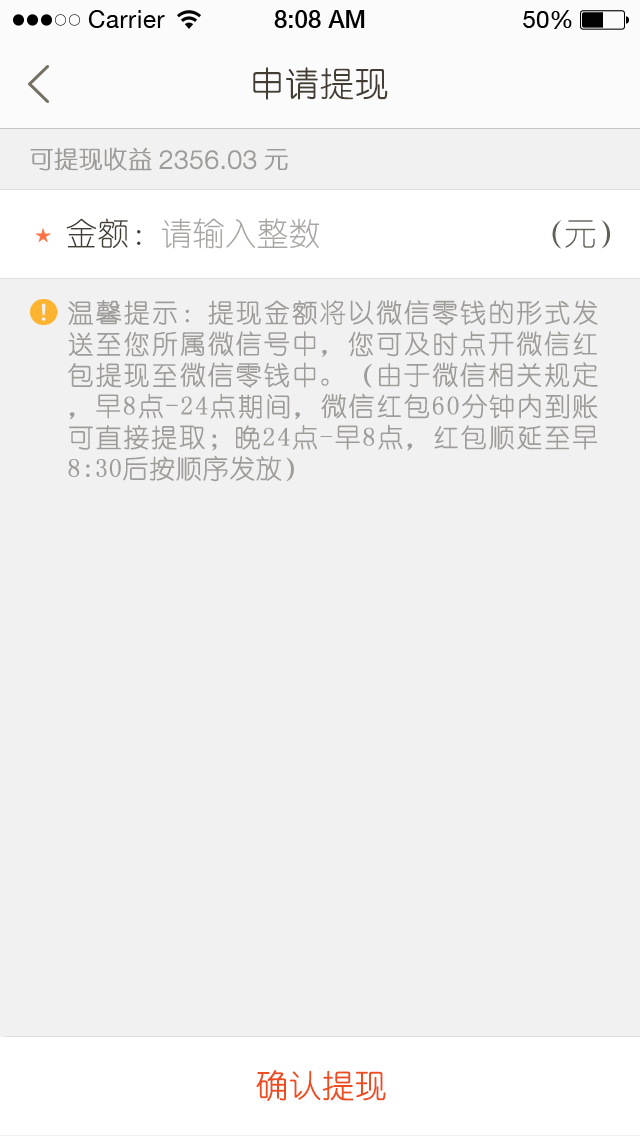
<style>
.page{position:relative;width:640px;height:1136px;background:#f1f1f1}
.page>*{position:absolute;margin:0}
.t1{font:34px "YouYuan";color:#433d33;text-transform:uppercase;font-weight:bold}
.t2{font:24px "YouYuan";color:#9e9c99;text-transform:uppercase;font-weight:bold}
.t3{font:26px "HelveticaNeueLTPro-Lt";color:#9e9c99;text-transform:uppercase;font-weight:bold}
.t4{font:32px "YouYuan";color:#433e34;text-transform:uppercase}
.t5{font:32px "YouYuan";color:#a7a6a3;text-transform:uppercase}
.t6{font:32px "YouYuan";color:#625e58;text-transform:uppercase}
.t7{font:26px "YouYuan";color:#9e9c99;text-transform:uppercase;font-weight:bold}
.t8{font:32px "YouYuan";color:#ed4e1f;text-transform:uppercase;font-weight:bold}
</style>
<div class="page">
<p class="t1" style="left:253px;top:67px;width:135px;height:33px">申请提现</p>
<p class="t2" style="left:30px;top:147px;width:122px;height:24px">可提现收益</p>
<p class="t3" style="left:159px;top:150px;width:98px;height:20px">2356.03</p>
<p class="t2" style="left:264px;top:149px;width:24px;height:21px">元</p>
<p class="t4" style="left:66px;top:218px;width:75px;height:30px">金额：</p>
<p class="t5" style="left:161px;top:218px;width:159px;height:31px">请输入整数</p>
<p class="t6" style="left:552px;top:220px;width:58px;height:29px">（元）</p>
<p class="t7" style="left:68px;top:300px;width:530px;height:182px;text-align:justify">温馨提示：提现金额将以微信零钱的形式发送至您所属微信号中，您可及时点开微信红包提现至微信零钱中。（由于微信相关规定，早8点-24点期间，微信红包60分钟内到账可直接提取；晚24点-早8点，红包顺延至早8:30后按顺序发放）</p>
<p class="t8" style="left:256px;top:1070px;width:130px;height:31px">确认提现</p>
</div>
